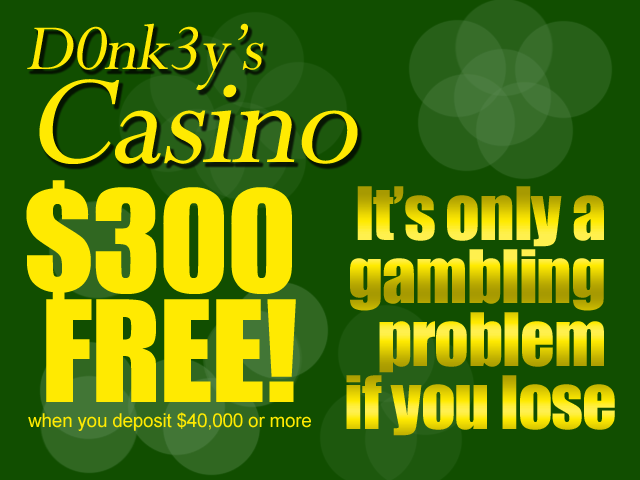
<style>
.page{position:relative;width:640px;height:480px;background:#114e00}
.page>*{position:absolute;margin:0}
.t1{font:72px/93px "Perpetua";letter-spacing:-0.015em;color:#ffea01;font-style:italic}
.t2{font:141px/93px "Perpetua";letter-spacing:-0.015em;color:#ffea01;font-style:italic}
.t3{font:19px/25px "ArialMT";letter-spacing:-0.015em;color:#ffea01}
.t4{font:130px/110px "Impact";letter-spacing:-0.015em;color:#ffea01}
.t5{font:68px/63px "Impact";letter-spacing:-0.015em}
</style>
<div class="page">
<p class="t1" style="left:27px;top:23px;width:331px;height:141px">D0nk3y’s<br><span class="t2">Casino</span></p>
<p class="t3" style="left:26px;top:180px;width:285px;height:251px;text-align:center"><span class="t4">$300 <br>FREE!<br></span>when you deposit $40,000 or more</p>
<p class="t5" style="left:346px;top:186px;width:269px;height:250px;text-align:right">It’s only a <br>gambling <br>problem <br>if you lose</p>
</div>
